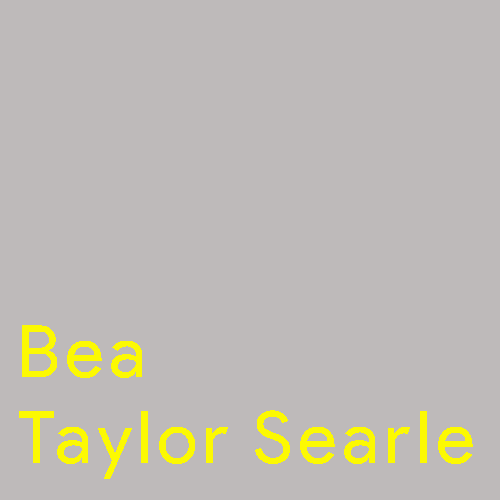
<style>
.page{position:relative;width:500px;height:500px;background:#bebaba}
.page>*{position:absolute;margin:0}
.t1{font:72px "ProductSans-Regular";letter-spacing:0.075em;color:#fcf902}
</style>
<div class="page">
<p class="t1" style="left:19px;top:325px;width:454px;height:154px">Bea <br>Taylor Searle</p>
</div>
